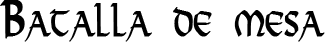
<style>
.page{position:relative;width:325px;height:42px;background:#ffffff}
.page>*{position:absolute;margin:0}
.t1{font:48px "Viking-Medium";color:#000000;font-variant:small-caps;font-weight:bold;scale:0.65 1}
</style>
<div class="page">
<p class="t1" style="left:0px;top:0px;width:325px;height:42px">Batalla de mesa</p>
</div>
